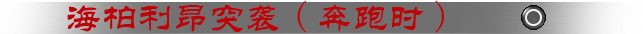
<style>
.page{position:relative;width:643px;height:34px;background:#707070}
.page>*{position:absolute;margin:0}
.t1{font:36px "STLiti";color:#ba060b}
.t2{font:36px "FangSong";color:#ba060b}
</style>
<div class="page">
<p class="t1" style="left:67px;top:0px;width:378px;height:33px">海柏利昂突袭<span class="t2">(</span>奔跑时<span class="t2">)</span></p>
</div>
